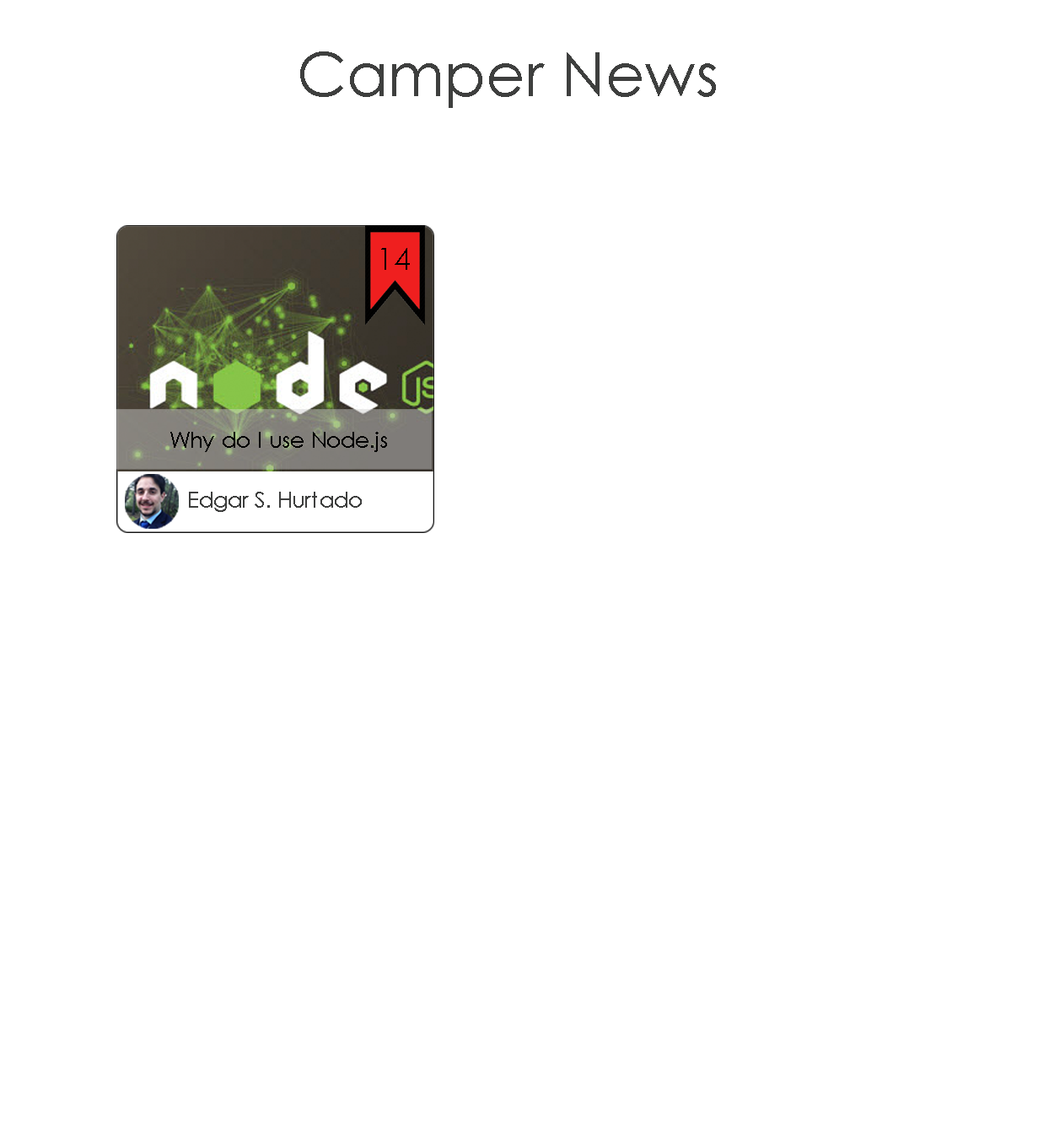
<style>
.page{position:relative;width:1049px;height:1136px;background:#ffffff}
.page>*{position:absolute;margin:0}
.t1{font:30.4px "CenturyGothic";color:#000000}
.t2{font:21.6px "CenturyGothic";color:#000000}
.t3{font:21.6px "CenturyGothic";color:#3e3f3e}
</style>
<div class="page">
<p class="t1" style="left:381px;top:248px;width:29px;height:22px">14</p>
<p class="t2" style="left:170px;top:432px;width:217px;height:20px">Why do I use Node.js</p>
<p class="t3" style="left:189px;top:492px;width:173px;height:20px">Edgar S. Hurtado</p>
</div>
